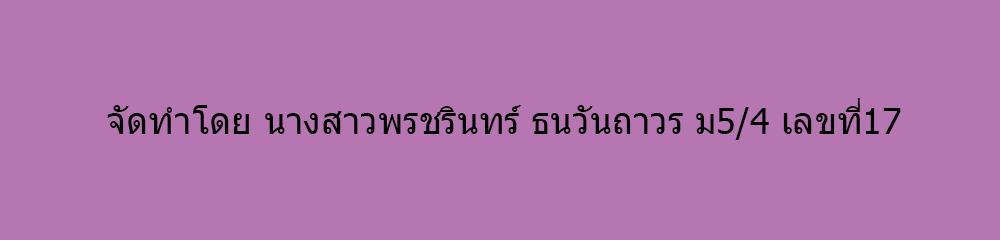
<style>
.page{position:relative;width:1000px;height:240px;background:#b676b2}
.page>*{position:absolute;margin:0}
.t1{font:36px "Tahoma";color:#000000}
</style>
<div class="page">
<p class="t1" style="left:107px;top:98px;width:794px;height:42px">จัดทำโดย นางสาวพรชรินทร์ ธนวันถาวร ม5/4 เลขที่17</p>
</div>
